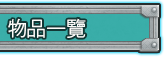
<style>
.page{position:relative;width:164px;height:57px}
.page>*{position:absolute;margin:0}
.t1{font:20px "GothicMB101Pr6N-Light";color:#fbfbf9}
</style>
<div class="page">
<p class="t1" style="left:8px;top:18px;width:78px;height:20px">物品一覽</p>
</div>
